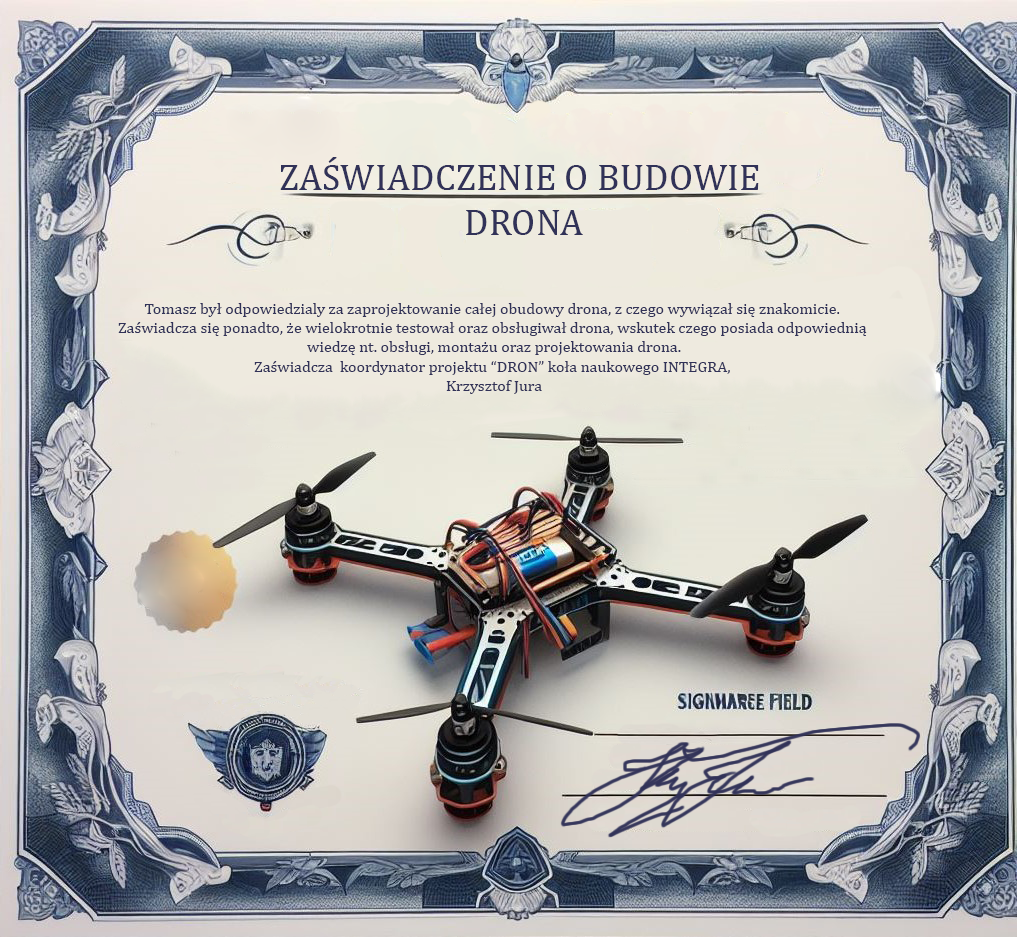
<style>
.page{position:relative;width:1017px;height:937px}
.page>*{position:absolute;margin:0}
.t1{font:37.3px "CambriaMath";color:#313258}
.t2{font:16px "CambriaMath";color:#313258}
</style>
<div class="page">
<p class="t1" style="left:280px;top:157px;width:479px;height:78px;text-align:center">ZAŚWIADCZENIE O BUDOWIE <br>DRONA</p>
<p class="t2" style="left:118px;top:303px;width:749px;height:91px;text-align:center">Tomasz był odpowiedzialy za zaprojektowanie całej obudowy drona, z czego wywiązał się znakomicie. <br>Zaświadcza się ponadto, że wielokrotnie testował oraz obsługiwał drona, wskutek czego posiada odpowiednią <br>wiedzę nt. obsługi, montażu oraz projektowania drona.<br>Zaświadcza  koordynator projektu “DRON” koła naukowego INTEGRA, <br>Krzysztof Jura</p>
</div>
